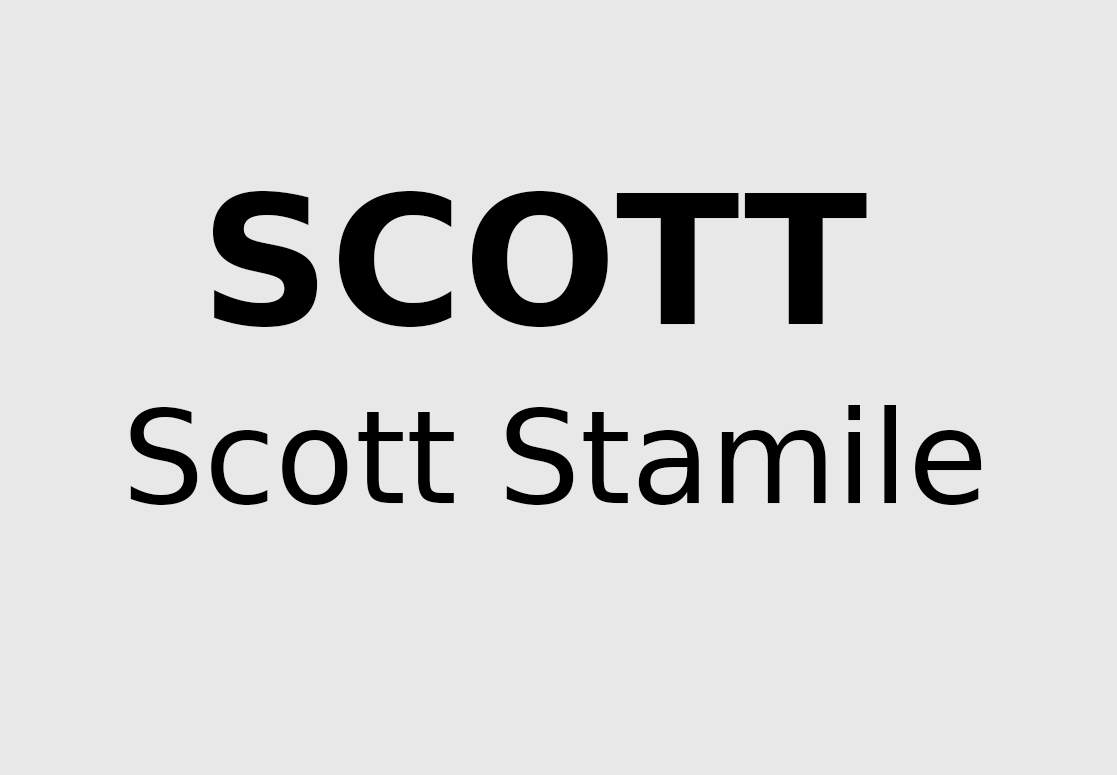
<style>
.page{position:relative;width:1117px;height:775px;background:#e8e8e8}
.page>*{position:absolute;margin:0}
.t1{font:179.9px "BitstreamVeraSans-Bold";color:#000000}
.t2{font:129.1px "BitstreamVeraSans-Roman";color:#000000}
</style>
<div class="page">
<p class="t1" style="left:212px;top:191px;width:655px;height:136px">SCOTT</p>
<p class="t2" style="left:130px;top:405px;width:852px;height:100px">Scott Stamile</p>
</div>
